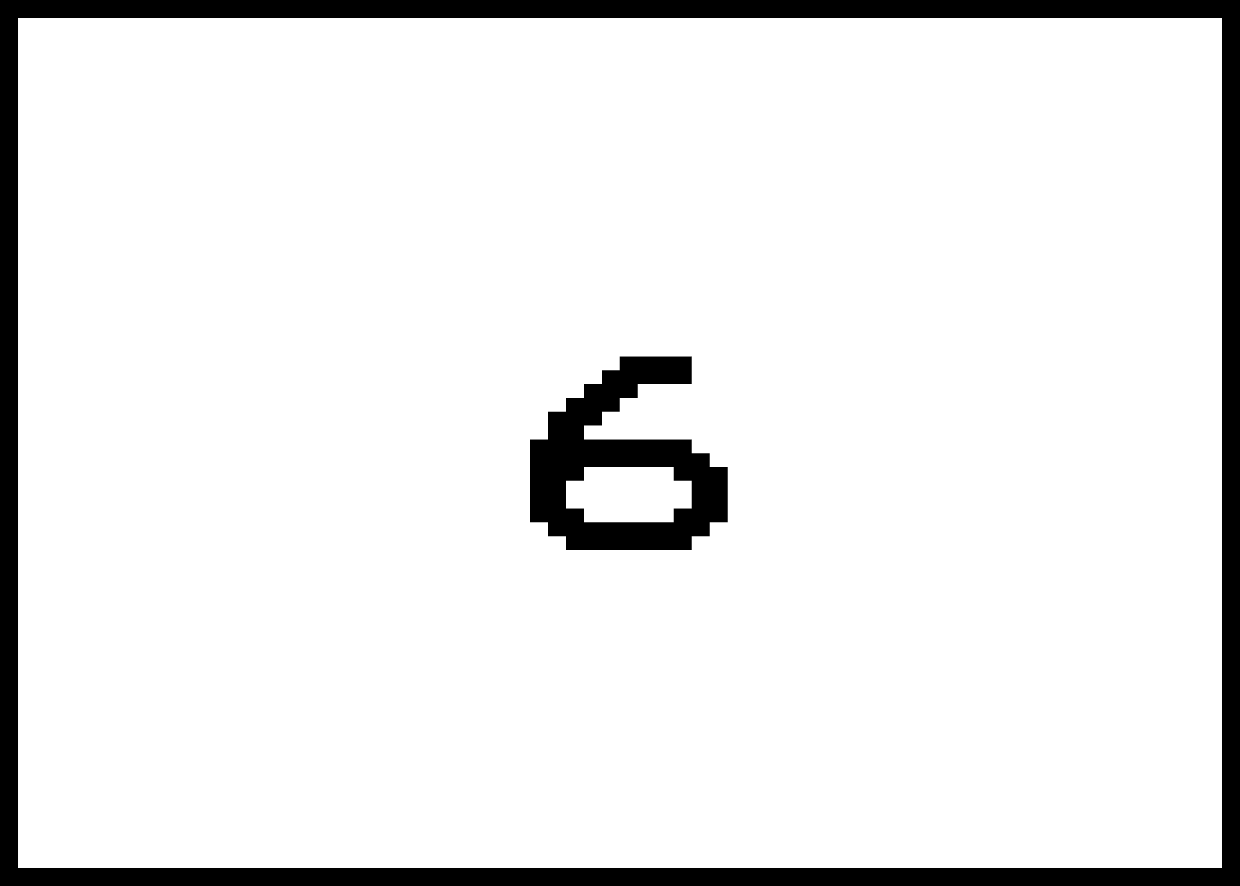
<style>
.page{position:relative;width:1240px;height:886px;background:#ffffff}
.page>*{position:absolute;margin:0}
.t1{font:221.2px "Terminal";color:#000000;scale:1.3 1}
</style>
<div class="page">
<p class="t1" style="left:530px;top:356px;width:198px;height:194px">6</p>
</div>
